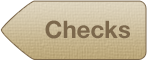
<style>
.page{position:relative;width:147px;height:60px}
.page>*{position:absolute;margin:0}
.t1{font:24px "HelveticaNeue-Bold";color:#7c684c}
</style>
<div class="page">
<p class="t1" style="left:45px;top:20px;width:85px;height:19px">Checks</p>
</div>
